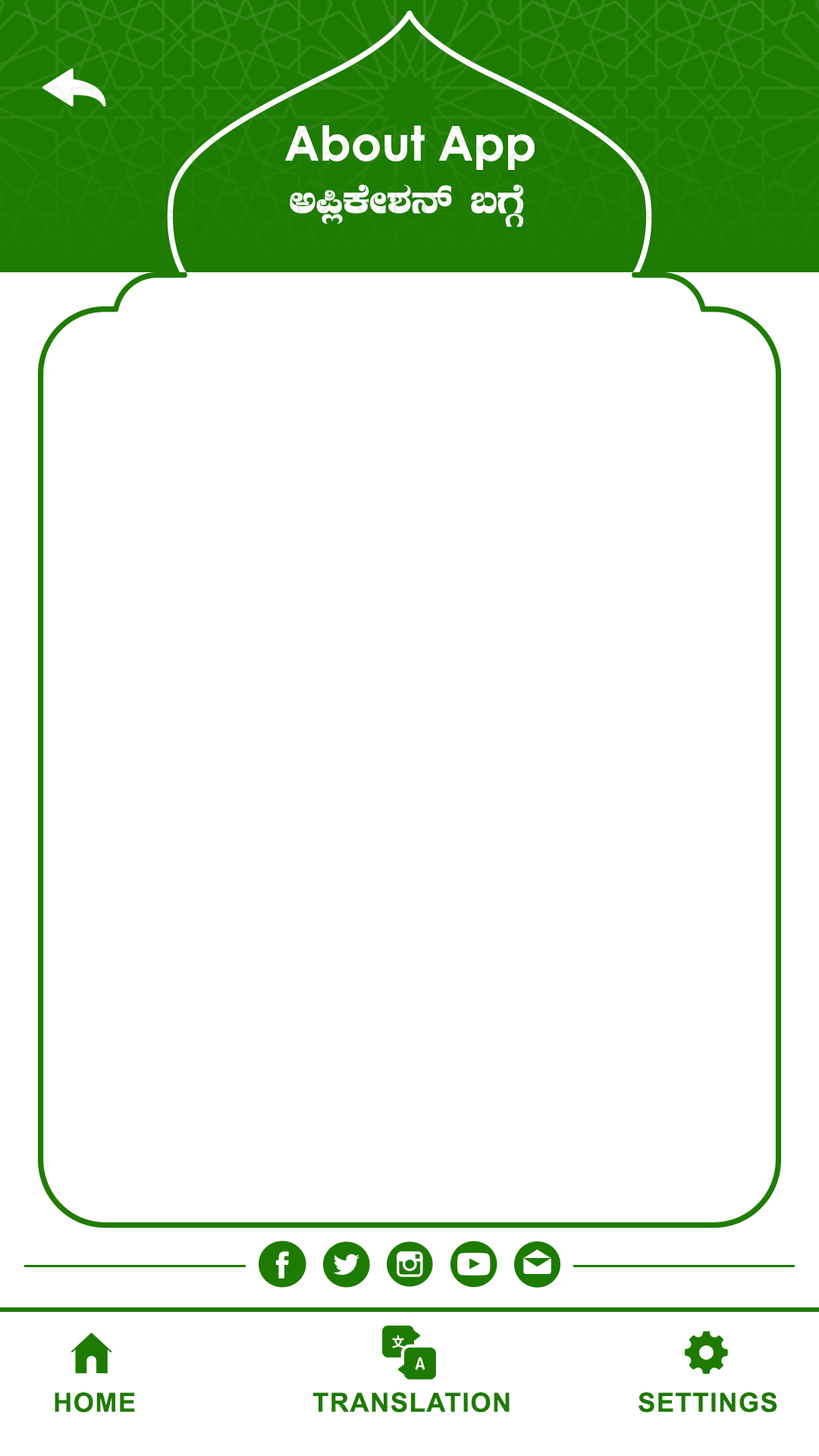
<style>
.page{position:relative;width:819px;height:1456px;background:#ffffff}
.page>*{position:absolute;margin:0}
.t1{font:47.8px "CenturyGothic-Bold";color:#ffffff}
.t2{font:45.5px "Nudi16e";color:#ffffff}
.t3{font:26.5px "Arial-BoldMT";letter-spacing:0.04em;color:#1e7b01}
</style>
<div class="page">
<p class="t1" style="left:285px;top:125px;width:250px;height:45px">About App</p>
<p class="t2" style="left:290px;top:184px;width:233px;height:43px">C¦èPÉÃ±À£ï §UÉÎ</p>
<p class="t3" style="left:55px;top:1392px;width:80px;height:21px">HOME</p>
<p class="t3" style="left:312px;top:1392px;width:198px;height:21px">TRANSLATION</p>
<p class="t3" style="left:639px;top:1392px;width:138px;height:21px">SETTINGS</p>
</div>
